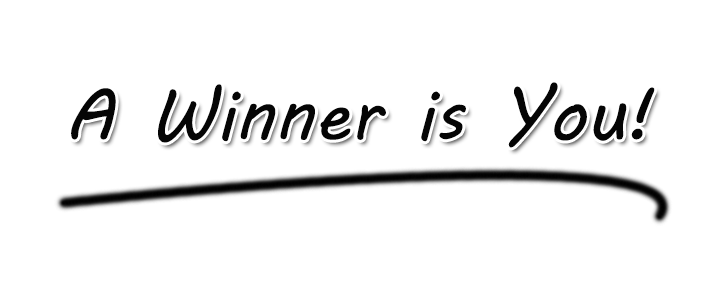
<style>
.page{position:relative;width:720px;height:300px;background:#ffffff}
.page>*{position:absolute;margin:0}
.t1{font:72px "MVBoli";color:#000000}
</style>
<div class="page">
<p class="t1" style="left:71px;top:82px;width:584px;height:66px">A Winner is You!</p>
</div>
